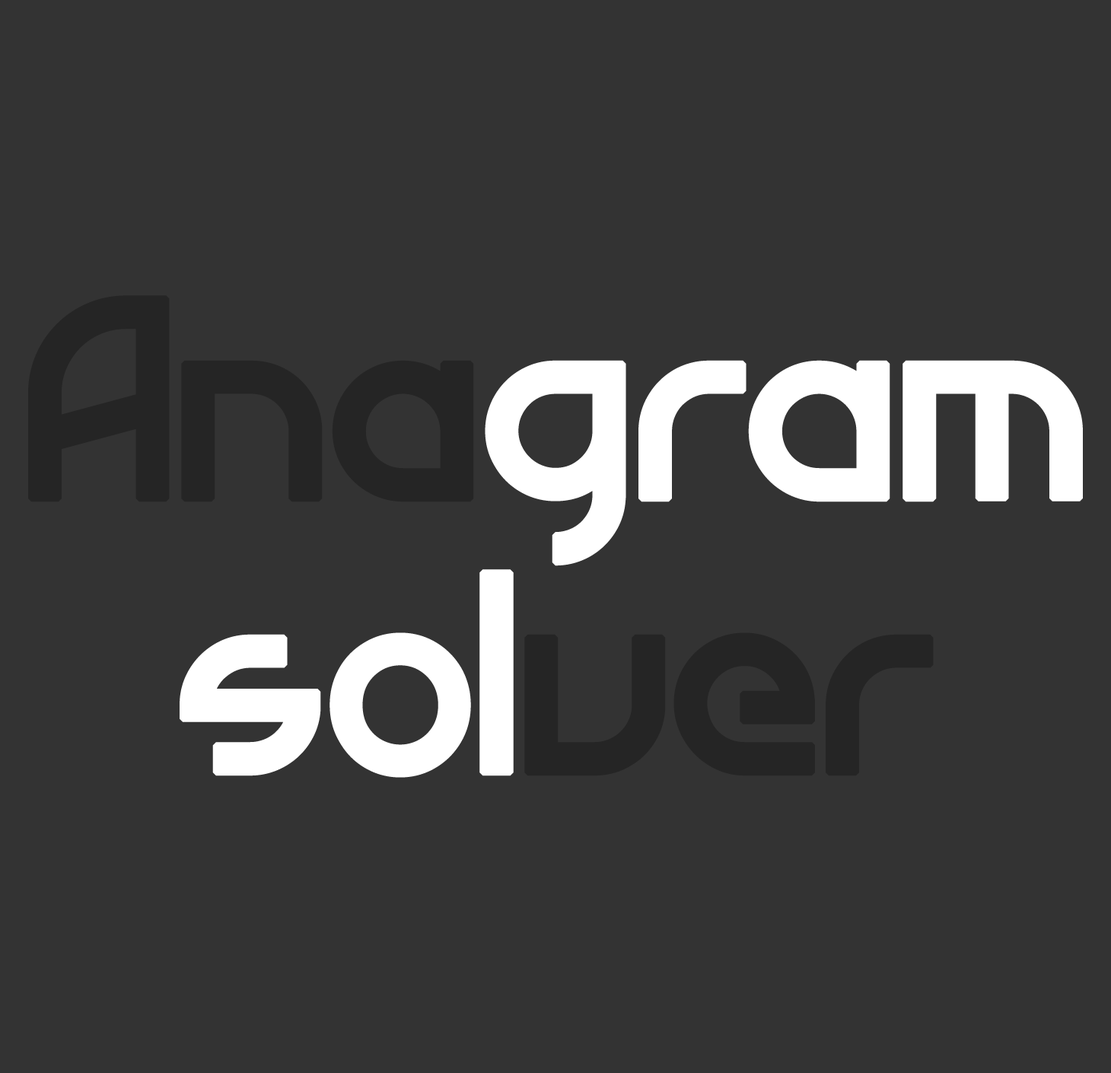
<style>
.page{position:relative;width:1111px;height:1073px;background:#333333}
.page>*{position:absolute;margin:0}
.t1{font:228.3px "Atiba-Regular";color:#ffffff;font-weight:bold}
.t2{font:228.3px "Atiba-Regular";color:#252525;font-weight:bold}
</style>
<div class="page">
<p class="t1" style="left:28px;top:295px;width:1055px;height:483px;text-align:center"><span class="t2">Ana</span>gram<br>sol<span class="t2">ver</span></p>
</div>
